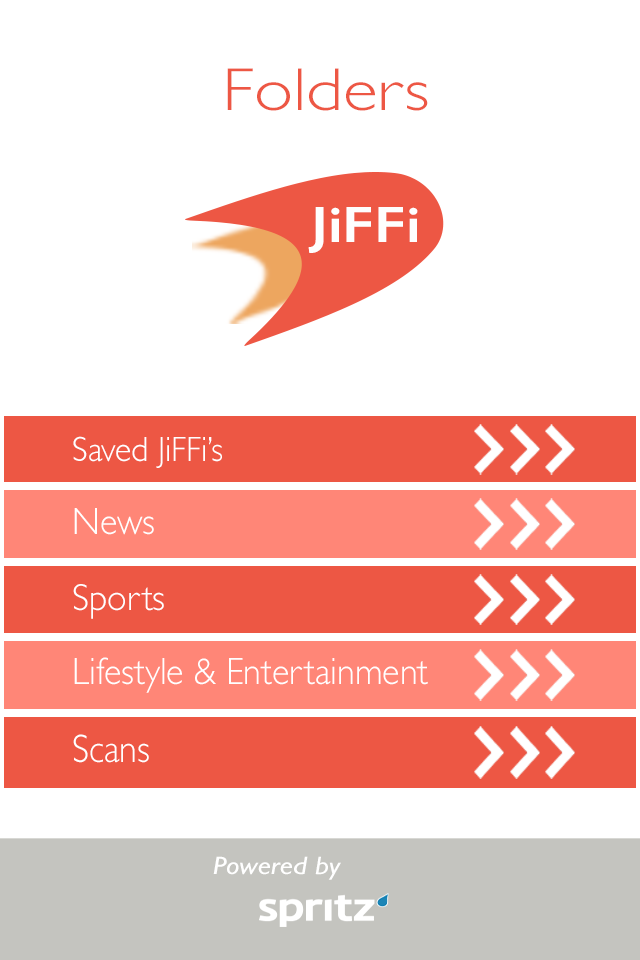
<style>
.page{position:relative;width:640px;height:960px;background:#ffffff}
.page>*{position:absolute;margin:0}
.t1{font:60.8px "GillSans-Light";color:#ed5744;scale:1.18 1}
.t2{font:51.1px "GillSans-SemiBold";color:#fefefe;scale:1.16 1}
.t3{font:35.4px "GillSans-Light";color:#ffffff;scale:0.95 1}
.t4{font:38.4px "GillSans-Light";color:#ffffff;scale:0.94 1}
.t5{font:37.9px "GillSans-Light";color:#ffffff;scale:0.95 1}
.t6{font:39.8px "GillSans-Light";color:#ffffff;scale:0.9 1}
.t7{font:25.4px "GillSans-Italic";color:#ffffff;scale:1.18 1}
</style>
<div class="page">
<p class="t1" style="left:227px;top:68px;width:201px;height:43px">Folders</p>
<p class="t2" style="left:308px;top:207px;width:110px;height:46px">JiFFi</p>
<p class="t3" style="left:73px;top:436px;width:149px;height:32px">Saved JiFFi’s</p>
<p class="t4" style="left:74px;top:508px;width:80px;height:27px">News</p>
<p class="t5" style="left:73px;top:584px;width:91px;height:35px">Sports</p>
<p class="t4" style="left:74px;top:657px;width:354px;height:36px">Lifestyle &amp; Entertainment</p>
<p class="t6" style="left:73px;top:734px;width:76px;height:29px">Scans</p>
<p class="t7" style="left:213px;top:856px;width:128px;height:24px">Powered by</p>
</div>
